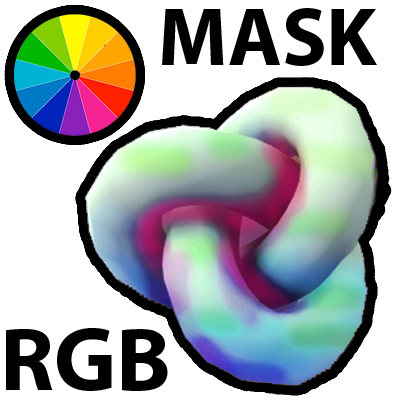
<style>
.page{position:relative;width:400px;height:400px;background:#ffffff}
.page>*{position:absolute;margin:0}
.t1{font:82.4px "MyriadPro-Bold";color:#000000}
.t2{font:91.1px "MyriadPro-Bold";color:#000000}
</style>
<div class="page">
<p class="t1" style="left:162px;top:8px;width:215px;height:58px">MASK</p>
<p class="t2" style="left:6px;top:328px;width:162px;height:63px">RGB</p>
</div>
